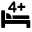
<style>
.page{position:relative;width:32px;height:32px;background:#ffffff}
.page>*{position:absolute;margin:0}
.t1{font:15px "ArialRoundedMTBold";color:#000000}
</style>
<div class="page">
<p class="t1" style="left:8px;top:1px;width:18px;height:12px">4+</p>
</div>
